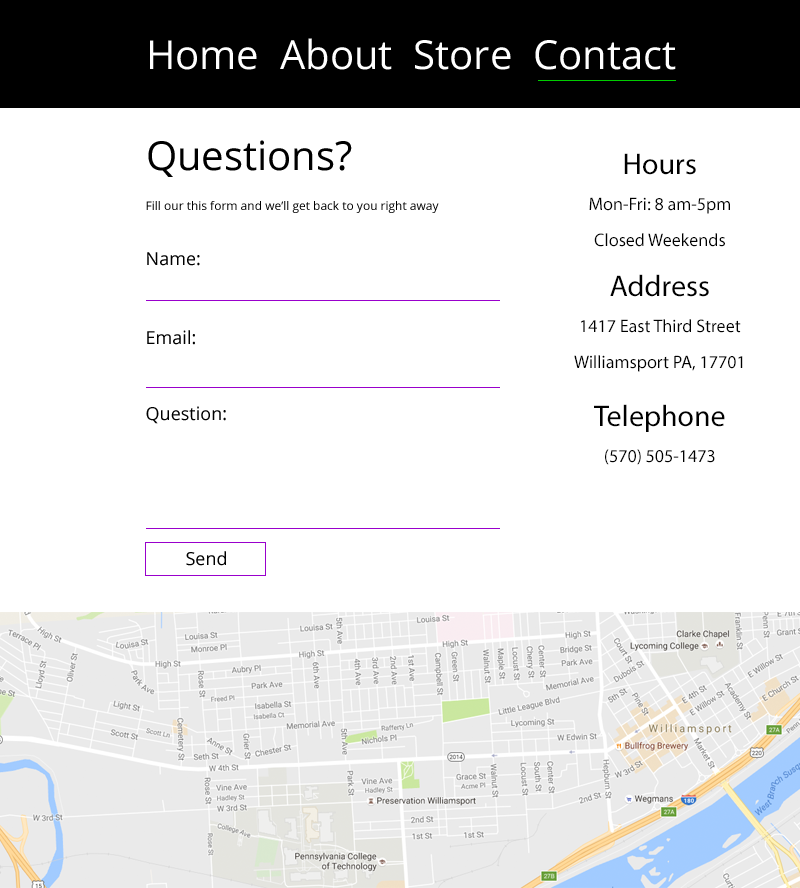
<style>
.page{position:relative;width:800px;height:888px;background:#ffffff}
.page>*{position:absolute;margin:0}
.t1{font:40px "OpenSans";color:#ffffff}
.t2{font:40px "OpenSans";color:#000000}
.t3{font:18px/36px "MyriadPro-Regular";color:#000000}
.t4{font:30px/24px "MyriadPro-Regular";color:#000000}
.t5{font:12px "OpenSans";color:#000000}
.t6{font:18px "OpenSans";color:#000000}
</style>
<div class="page">
<p class="t1" style="left:150px;top:38px;width:526px;height:32px">Home  About  Store  Contact</p>
<p class="t2" style="left:148px;top:140px;width:204px;height:37px">Questions?</p>
<p class="t3" style="left:589px;top:153px;width:141px;height:94px;text-align:center"><span class="t4">Hours<br></span>Mon-Fri: 8 am-5pm<br>Closed Weekends</p>
<p class="t5" style="left:146px;top:201px;width:293px;height:12px">Fill our this form and we’ll get back to you right away</p>
<p class="t6" style="left:147px;top:252px;width:53px;height:14px">Name:</p>
<p class="t3" style="left:574px;top:274px;width:169px;height:98px;text-align:center"><span class="t4">Address<br></span>1417 East Third Street <br>Williamsport PA, 17701</p>
<p class="t6" style="left:147px;top:330px;width:48px;height:15px">Email:</p>
<p class="t6" style="left:146px;top:406px;width:80px;height:18px">Question:</p>
<p class="t3" style="left:594px;top:404px;width:131px;height:61px;text-align:center"><span class="t4">Telephone<br></span>(570) 505-1473</p>
<p class="t6" style="left:186px;top:551px;width:40px;height:15px">Send</p>
</div>
